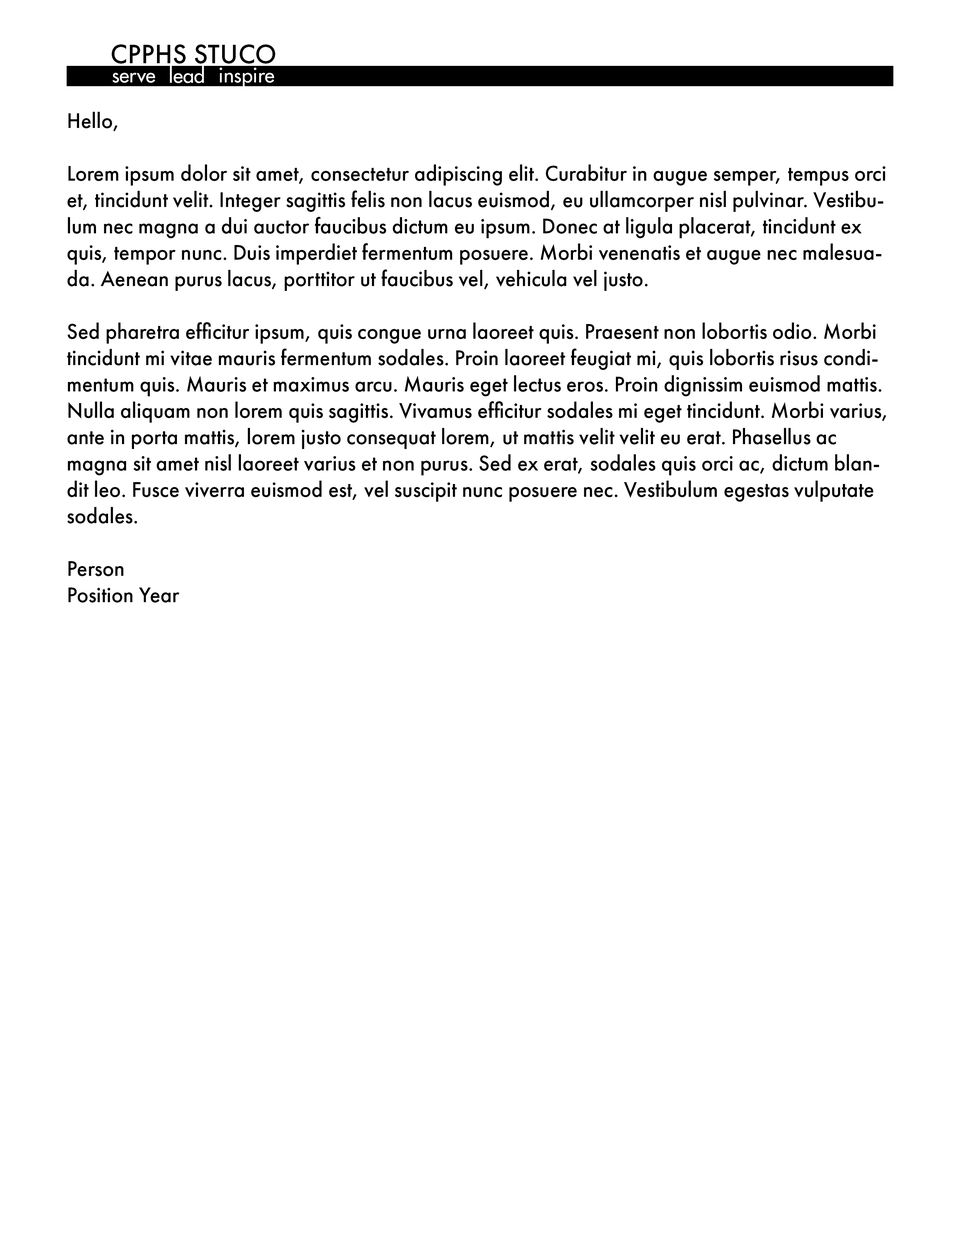
<style>
.page{position:relative;width:960px;height:1242px;background:#ffffff}
.page>*{position:absolute;margin:0}
.t1{font:27.7px "FuturaPT-Medium";letter-spacing:0.01em;color:#000000;text-transform:uppercase}
.t2{font:19.9px "Futura-Medium";color:#ffffff}
.t3{font:22px "FuturaPT-Medium";color:#000000}
</style>
<div class="page">
<p class="t1" style="left:111px;top:44px;width:164px;height:20px">CPPHS STUCO</p>
<p class="t2" style="left:170px;top:65px;width:34px;height:18px">lead</p>
<p class="t2" style="left:113px;top:73px;width:42px;height:10px">serve</p>
<p class="t2" style="left:219px;top:67px;width:55px;height:21px">inspire</p>
<p class="t3" style="left:67px;top:112px;width:819px;height:491px">Hello,<br><br>Lorem ipsum dolor sit amet, consectetur adipiscing elit. Curabitur in augue semper, tempus orci et, tincidunt velit. Integer sagittis felis non lacus euismod, eu ullamcorper nisl pulvinar. Vestibulum nec magna a dui auctor faucibus dictum eu ipsum. Donec at ligula placerat, tincidunt ex quis, tempor nunc. Duis imperdiet fermentum posuere. Morbi venenatis et augue nec malesuada. Aenean purus lacus, porttitor ut faucibus vel, vehicula vel justo.<br><br>Sed pharetra efficitur ipsum, quis congue urna laoreet quis. Praesent non lobortis odio. Morbi tincidunt mi vitae mauris fermentum sodales. Proin laoreet feugiat mi, quis lobortis risus condimentum quis. Mauris et maximus arcu. Mauris eget lectus eros. Proin dignissim euismod mattis. Nulla aliquam non lorem quis sagittis. Vivamus efficitur sodales mi eget tincidunt. Morbi varius, ante in porta mattis, lorem justo consequat lorem, ut mattis velit velit eu erat. Phasellus ac magna sit amet nisl laoreet varius et non purus. Sed ex erat, sodales quis orci ac, dictum blandit leo. Fusce viverra euismod est, vel suscipit nunc posuere nec. Vestibulum egestas vulputate sodales.<br><br>Person<br>Position Year</p>
</div>
